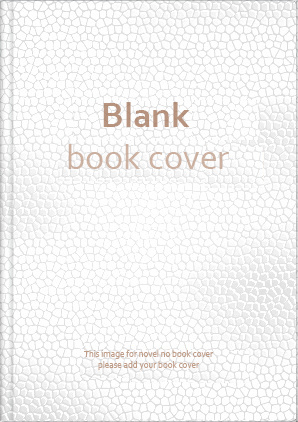
<style>
.page{position:relative;width:298px;height:422px;background:#ffffff}
.page>*{position:absolute;margin:0}
.t1{font:36px "Corbel-Bold";color:#b89580}
.t2{font:36px "Corbel";color:#ccb2a2}
.t3{font:9px "Corbel";color:#c09d87}
</style>
<div class="page">
<p class="t1" style="left:103px;top:102px;width:87px;height:25px">Blank</p>
<p class="t2" style="left:68px;top:144px;width:161px;height:25px">book cover</p>
<p class="t3" style="left:84px;top:350px;width:130px;height:20px;text-align:center">This image for novel no book cover<br>please add your book cover</p>
</div>
